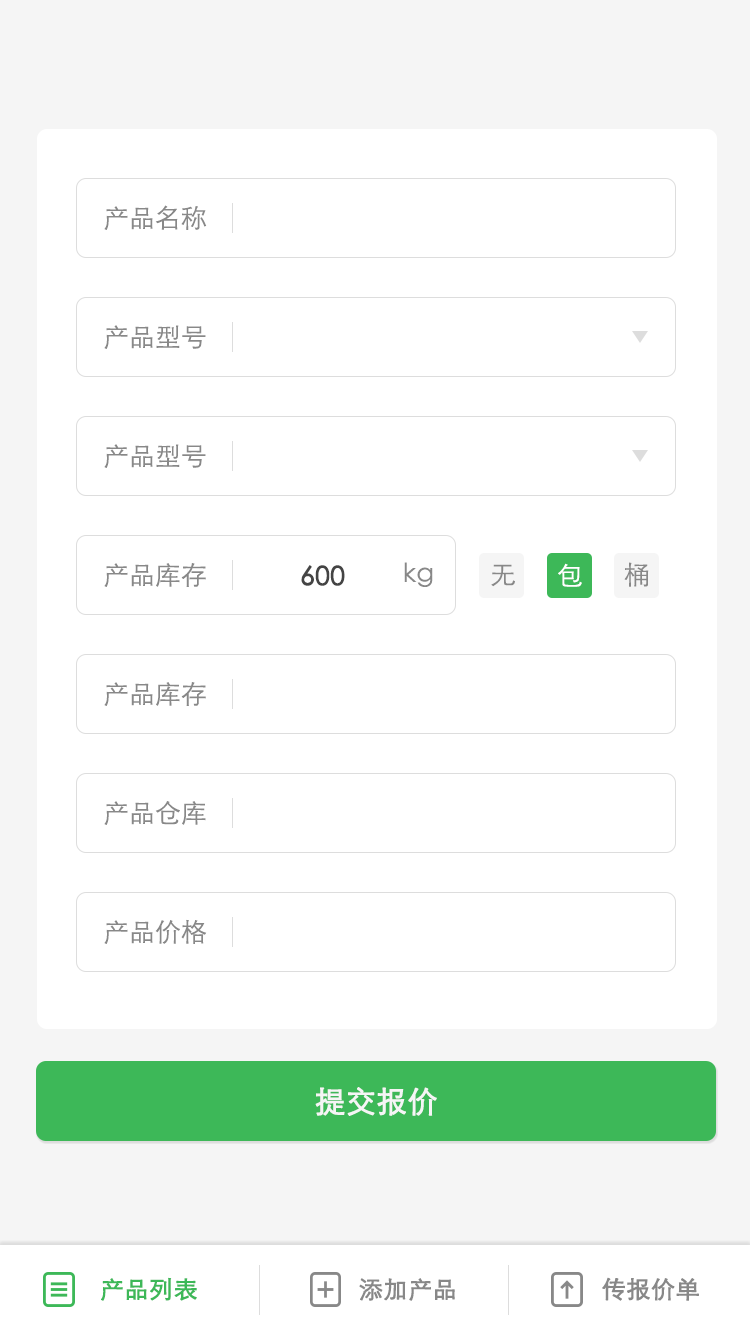
<style>
.page{position:relative;width:750px;height:1334px;background:#ffffff}
.page>*{position:absolute;margin:0}
.t1{font:26px "STXihei";color:#888888}
.t2{font:26px "STXihei";color:#444444;font-weight:bold}
.t3{font:26px "STXihei";color:#ffffff}
.t4{font:30px "STXihei";color:#f5f5f5;font-weight:bold}
.t5{font:24px "STXihei";color:#3db858;font-weight:bold}
.t6{font:24px "STXihei";color:#888888;font-weight:bold}
</style>
<div class="page">
<p class="t1" style="left:104px;top:205px;width:103px;height:25px">产品名称</p>
<p class="t1" style="left:104px;top:325px;width:102px;height:24px">产品型号</p>
<p class="t1" style="left:104px;top:444px;width:102px;height:24px">产品型号</p>
<p class="t1" style="left:104px;top:563px;width:102px;height:24px">产品库存</p>
<p class="t2" style="left:301px;top:565px;width:44px;height:21px">600</p>
<p class="t1" style="left:404px;top:562px;width:29px;height:25px">kg</p>
<p class="t1" style="left:491px;top:564px;width:24px;height:23px">无</p>
<p class="t3" style="left:558px;top:563px;width:24px;height:24px">包</p>
<p class="t1" style="left:624px;top:562px;width:25px;height:25px">桶</p>
<p class="t1" style="left:104px;top:682px;width:102px;height:24px">产品库存</p>
<p class="t1" style="left:104px;top:801px;width:102px;height:24px">产品仓库</p>
<p class="t1" style="left:104px;top:919px;width:103px;height:25px">产品价格</p>
<p class="t4" style="left:315px;top:1087px;width:122px;height:29px">提交报价</p>
<p class="t5" style="left:101px;top:1277px;width:96px;height:24px">产品列表</p>
<p class="t6" style="left:359px;top:1278px;width:96px;height:23px">添加产品</p>
<p class="t6" style="left:602px;top:1277px;width:97px;height:24px">传报价单</p>
</div>
